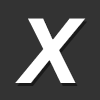
<style>
.page{position:relative;width:100px;height:100px;background:#333333}
.page>*{position:absolute;margin:0}
.t1{font:90px "ProductSans-BoldItalic";color:#ffffff}
</style>
<div class="page">
<p class="t1" style="left:15px;top:18px;width:71px;height:65px">X</p>
</div>
